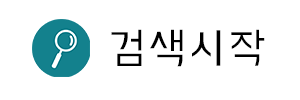
<style>
.page{position:relative;width:300px;height:100px;background:#ffffff}
.page>*{position:absolute;margin:0}
.t1{font:46px "BMHANNAAir";letter-spacing:0.06em;color:#000000}
</style>
<div class="page">
<p class="t1" style="left:111px;top:29px;width:154px;height:38px">검색시작</p>
</div>
